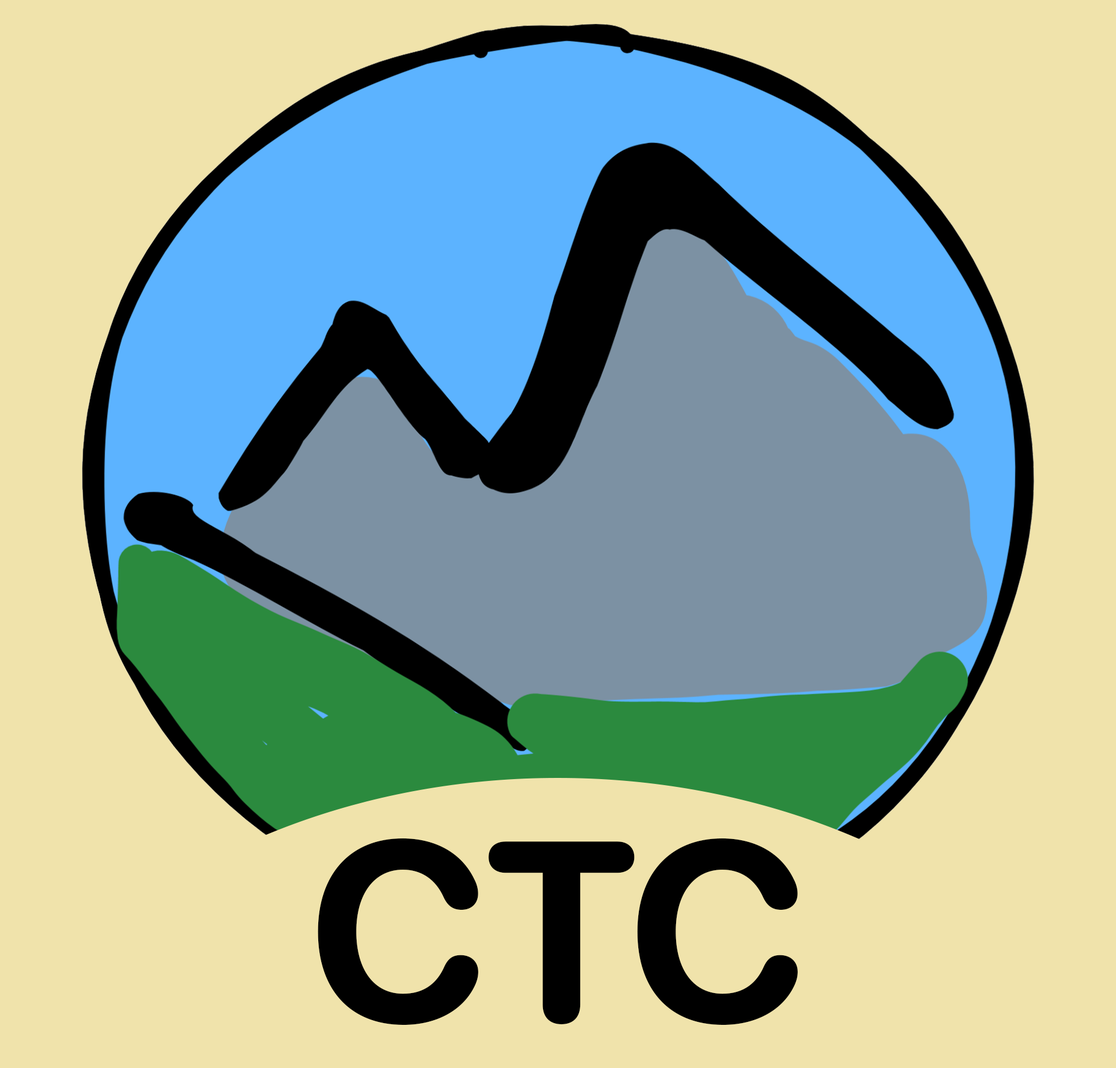
<style>
.page{position:relative;width:1116px;height:1068px;background:#f0e3ab}
.page>*{position:absolute;margin:0}
.t1{font:255.9px "SFProRounded-Bold";color:#000000}
</style>
<div class="page">
<p class="t1" style="left:318px;top:838px;width:480px;height:188px">CTC</p>
</div>
